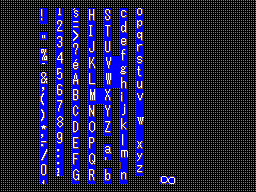
<style>
.page{position:relative;width:256px;height:192px;background:#000000}
.page>*{position:absolute;margin:0}
.t1{font:8px "TLOZ-Minish-Cap/A-Link-to-the-Past/Four-Sword";letter-spacing:0.01em;color:#ffffff}
</style>
<div class="page">
<p class="t1" style="left:41px;top:9px;width:1px;height:11px">!</p>
<p class="t1" style="left:105px;top:9px;width:5px;height:11px">S</p>
<p class="t1" style="left:121px;top:10px;width:5px;height:7px">c</p>
<p class="t1" style="left:137px;top:8px;width:5px;height:7px">o</p>
<p class="t1" style="left:57px;top:20px;width:5px;height:11px">2</p>
<p class="t1" style="left:89px;top:25px;width:3px;height:11px">I</p>
<p class="t1" style="left:105px;top:25px;width:5px;height:11px">T</p>
<p class="t1" style="left:121px;top:21px;width:5px;height:11px">d</p>
<p class="t1" style="left:137px;top:20px;width:5px;height:8px">p</p>
<p class="t1" style="left:57px;top:36px;width:5px;height:11px">3</p>
<p class="t1" style="left:89px;top:41px;width:5px;height:11px">J</p>
<p class="t1" style="left:105px;top:41px;width:5px;height:11px">U</p>
<p class="t1" style="left:121px;top:38px;width:5px;height:7px">e</p>
<p class="t1" style="left:57px;top:52px;width:6px;height:11px">4</p>
<p class="t1" style="left:121px;top:49px;width:4px;height:11px">f</p>
<p class="t1" style="left:73px;top:59px;width:5px;height:10px">é</p>
<p class="t1" style="left:89px;top:57px;width:6px;height:11px">K</p>
<p class="t1" style="left:106px;top:57px;width:5px;height:11px">V</p>
<p class="t1" style="left:137px;top:56px;width:5px;height:7px">s</p>
<p class="t1" style="left:57px;top:68px;width:5px;height:11px">5</p>
<p class="t1" style="left:73px;top:73px;width:5px;height:11px">A</p>
<p class="t1" style="left:89px;top:73px;width:6px;height:11px">L</p>
<p class="t1" style="left:106px;top:73px;width:5px;height:11px">W</p>
<p class="t1" style="left:120px;top:66px;width:6px;height:8px">g</p>
<p class="t1" style="left:121px;top:77px;width:5px;height:11px">h</p>
<p class="t1" style="left:137px;top:66px;width:4px;height:10px">t</p>
<p class="t1" style="left:42px;top:87px;width:2px;height:4px">‘</p>
<p class="t1" style="left:73px;top:89px;width:5px;height:11px">B</p>
<p class="t1" style="left:90px;top:89px;width:5px;height:11px">M</p>
<p class="t1" style="left:105px;top:89px;width:5px;height:11px">X</p>
<p class="t1" style="left:137px;top:81px;width:5px;height:7px">u</p>
<p class="t1" style="left:57px;top:100px;width:5px;height:11px">7</p>
<p class="t1" style="left:89px;top:105px;width:5px;height:11px">N</p>
<p class="t1" style="left:105px;top:105px;width:5px;height:11px">Y</p>
<p class="t1" style="left:122px;top:104px;width:3px;height:11px">j</p>
<p class="t1" style="left:73px;top:121px;width:5px;height:11px">D</p>
<p class="t1" style="left:105px;top:121px;width:5px;height:11px">Z</p>
<p class="t1" style="left:121px;top:118px;width:5px;height:11px">k</p>
<p class="t1" style="left:41px;top:134px;width:2px;height:4px">,</p>
<p class="t1" style="left:57px;top:132px;width:5px;height:11px">9</p>
<p class="t1" style="left:73px;top:137px;width:5px;height:11px">E</p>
<p class="t1" style="left:89px;top:137px;width:5px;height:11px">P</p>
<p class="t1" style="left:105px;top:146px;width:6px;height:7px">a</p>
<p class="t1" style="left:137px;top:141px;width:5px;height:7px">x</p>
<p class="t1" style="left:73px;top:153px;width:5px;height:11px">F</p>
<p class="t1" style="left:89px;top:153px;width:6px;height:11px">Q</p>
<p class="t1" style="left:137px;top:153px;width:5px;height:8px">y</p>
<p class="t1" style="left:41px;top:164px;width:5px;height:11px">0</p>
<p class="t1" style="left:73px;top:169px;width:6px;height:11px">G</p>
<p class="t1" style="left:89px;top:169px;width:5px;height:11px">R</p>
<p class="t1" style="left:105px;top:169px;width:5px;height:11px">b</p>
<p class="t1" style="left:121px;top:172px;width:5px;height:7px">n</p>
<p class="t1" style="left:137px;top:165px;width:5px;height:7px">z</p>
</div>
